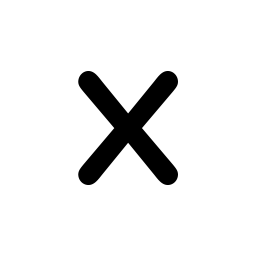
<style>
.page{position:relative;width:256px;height:256px;background:#ffffff}
.page>*{position:absolute;margin:0}
.t1{font:212px "OCRAStd";color:#000000}
</style>
<div class="page">
<p class="t1" style="left:78px;top:71px;width:100px;height:114px">x</p>
</div>
